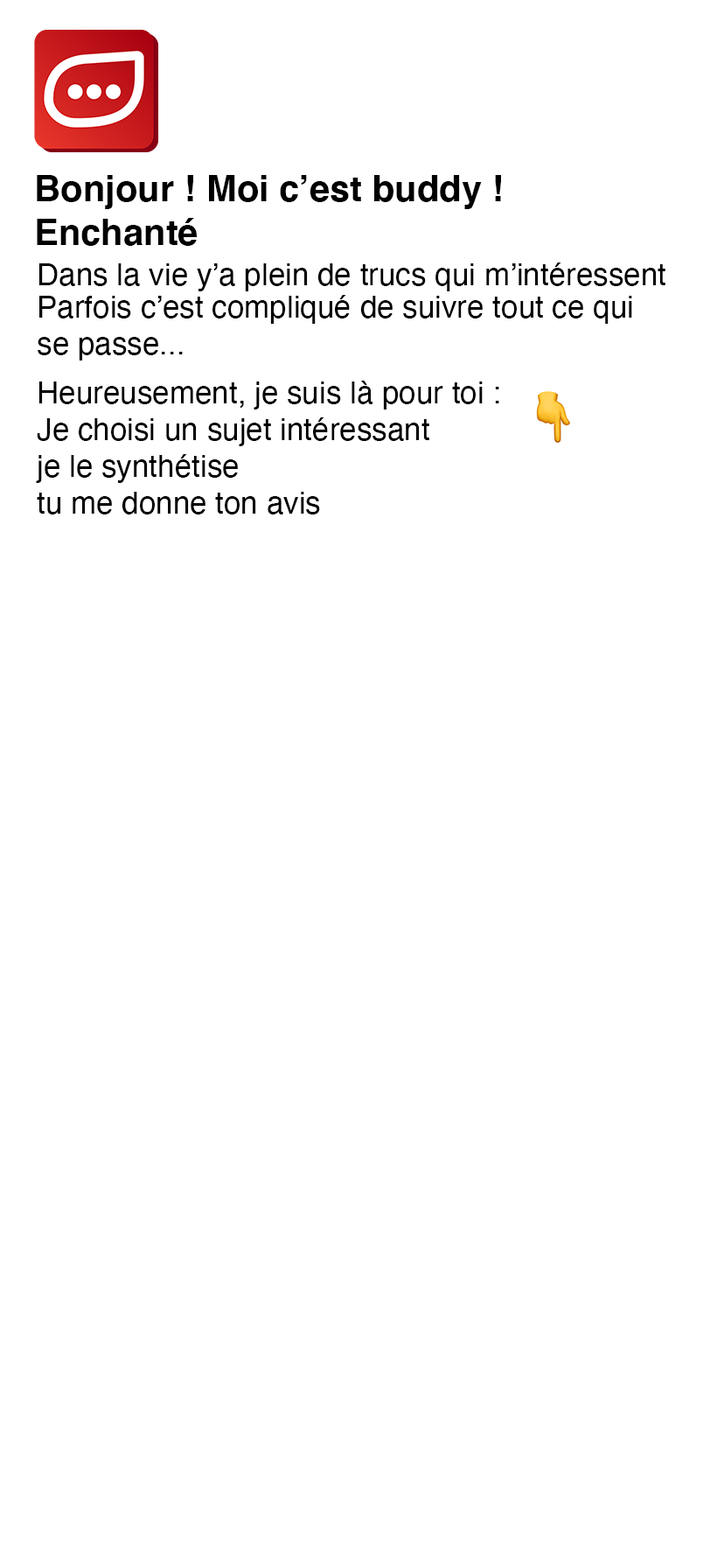
<style>
.page{position:relative;width:724px;height:1568px;background:#ffffff}
.page>*{position:absolute;margin:0}
.t1{font:36.5px "Helvetica-Bold";color:#000000}
.t2{font:30.6px "Helvetica";color:#000000}
</style>
<div class="page">
<p class="t1" style="left:37px;top:175px;width:464px;height:71px">Bonjour ! Moi c’est buddy !<br>Enchanté</p>
<p class="t2" style="left:38px;top:262px;width:628px;height:29px">Dans la vie y’a plein de trucs qui m’intéressent</p>
<p class="t2" style="left:38px;top:295px;width:595px;height:65px">Parfois c’est compliqué de suivre tout ce qui <br>se passe...</p>
<p class="t2" style="left:36px;top:381px;width:464px;height:133px">Heureusement, je suis là pour toi :<br>Je choisi un sujet intéressant<br>je le synthétise<br>tu me donne ton avis</p>
</div>
